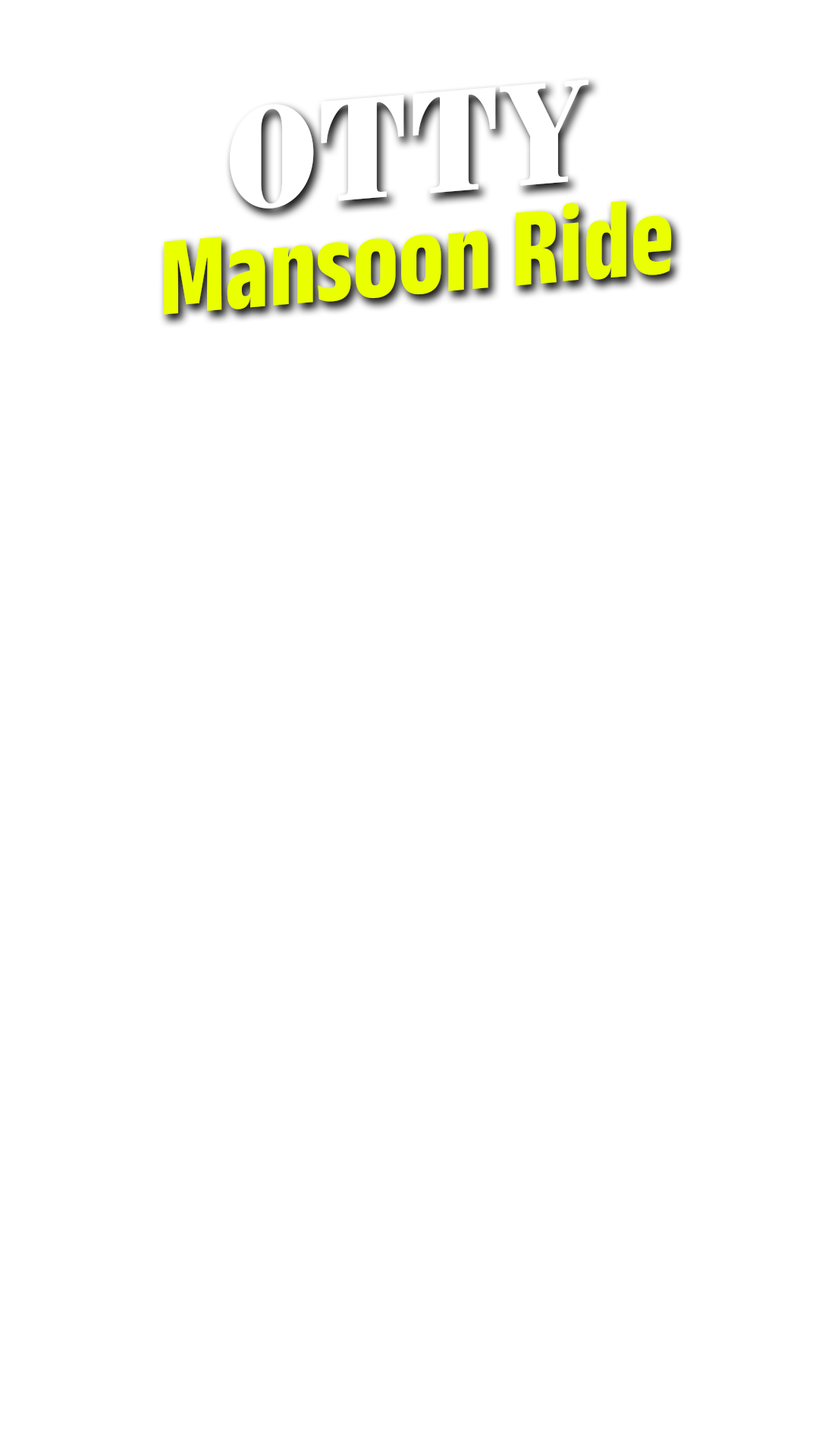
<style>
.page{position:relative;width:819px;height:1456px;background:#ffffff}
.page>*{position:absolute;margin:0}
.t1{font:123.2px "BrimNarrow-Face";color:#ffffff;text-transform:uppercase}
.t2{font:113.7px "AnekKannadaCondensed-Bold";color:#eaff00}
</style>
<div class="page">
<p class="t1" style="left:230px;top:79px;width:358px;height:130px;rotate:-5deg">Otty</p>
<p class="t2" style="left:163px;top:200px;width:509px;height:115px;rotate:-5deg">Mansoon Ride</p>
</div>
